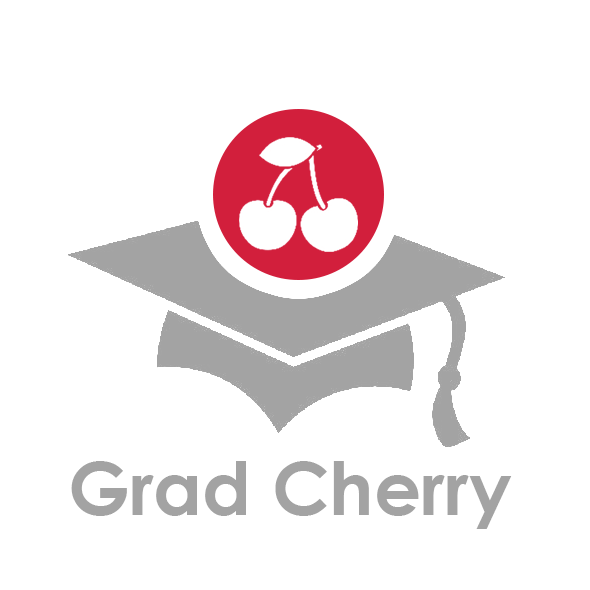
<style>
.page{position:relative;width:590px;height:590px;background:#ffffff}
.page>*{position:absolute;margin:0}
.t1{font:74px "CenturyGothic-Bold";color:#a3a3a3}
</style>
<div class="page">
<p class="t1" style="left:71px;top:461px;width:441px;height:68px">Grad Cherry</p>
</div>
